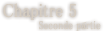
<style>
.page{position:relative;width:104px;height:31px;background:#ffffff}
.page>*{position:absolute;margin:0}
.t1{font:19px "MS-PMincho";color:#d6cdc1;font-weight:bold;scale:0.84 1}
.t2{font:11.4px "MS-PMincho";color:#d6cdc1;font-weight:bold;scale:0.84 1}
</style>
<div class="page">
<p class="t1" style="left:3px;top:3px;width:73px;height:17px">Chapitre 5</p>
<p class="t2" style="left:39px;top:21px;width:62px;height:10px">Seconde partie</p>
</div>
